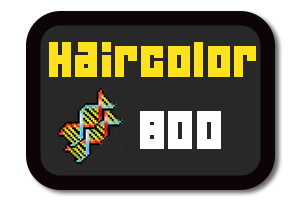
<style>
.page{position:relative;width:300px;height:200px;background:#282828}
.page>*{position:absolute;margin:0}
.t1{font:44px "04b19";letter-spacing:0.025em;color:#ffe21d}
.t2{font:48px "04b19";letter-spacing:0.025em;color:#ffffff}
</style>
<div class="page">
<p class="t1" style="left:49px;top:42px;width:207px;height:35px">Haircolor</p>
<p class="t2" style="left:140px;top:111px;width:81px;height:38px">800</p>
</div>
